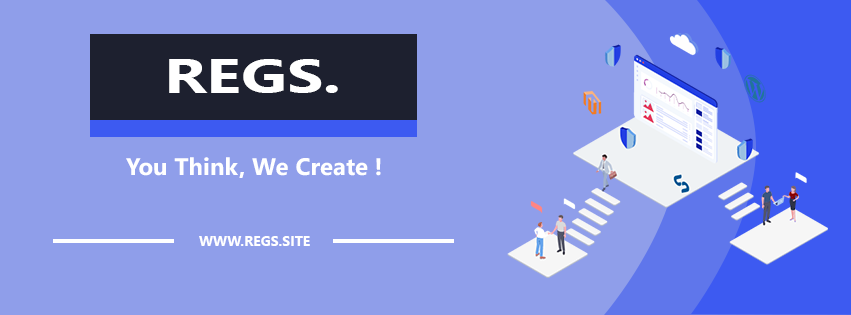
<style>
.page{position:relative;width:851px;height:315px;background:#8f9eea}
.page>*{position:absolute;margin:0}
.t1{font:47.6px "SegoeUI-Bold";color:#ffffff;scale:1.36 1}
.t2{font:24px "SegoeUI-Bold";color:#ffffff}
.t3{font:14px "SegoeUI-Bold";color:#ffffff}
</style>
<div class="page">
<p class="t1" style="left:169px;top:59px;width:169px;height:34px">.REGS</p>
<p class="t2" style="left:126px;top:157px;width:255px;height:21px">! You Think, We Create</p>
<p class="t3" style="left:199px;top:236px;width:111px;height:10px">WWW.REGS.SITE</p>
</div>
